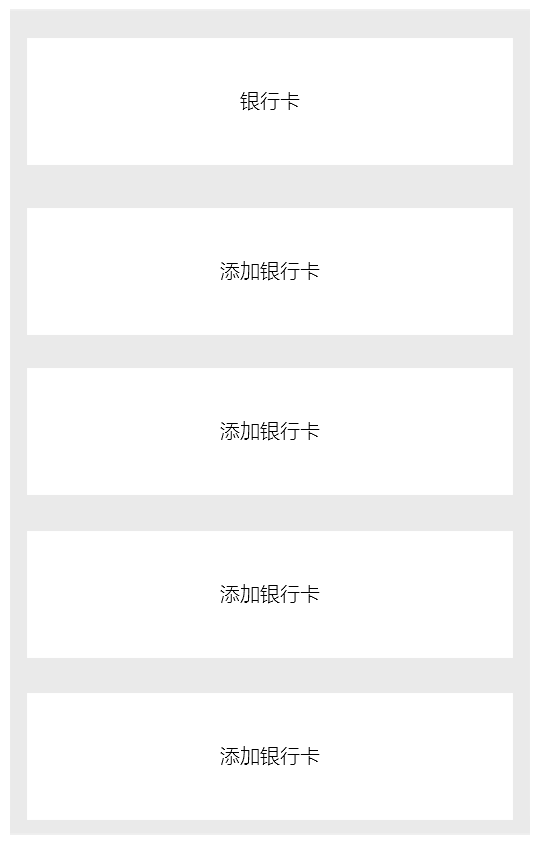
<style>
.page{position:relative;width:540px;height:851px;background:#ffffff}
.page>*{position:absolute;margin:0}
.t1{font:20px "FZLTXHK--GBK1-0";color:#000000}
</style>
<div class="page">
<p class="t1" style="left:240px;top:92px;width:60px;height:19px">银行卡</p>
<p class="t1" style="left:220px;top:261px;width:100px;height:20px">添加银行卡</p>
<p class="t1" style="left:220px;top:421px;width:100px;height:20px">添加银行卡</p>
<p class="t1" style="left:220px;top:584px;width:100px;height:20px">添加银行卡</p>
<p class="t1" style="left:220px;top:746px;width:100px;height:20px">添加银行卡</p>
</div>
